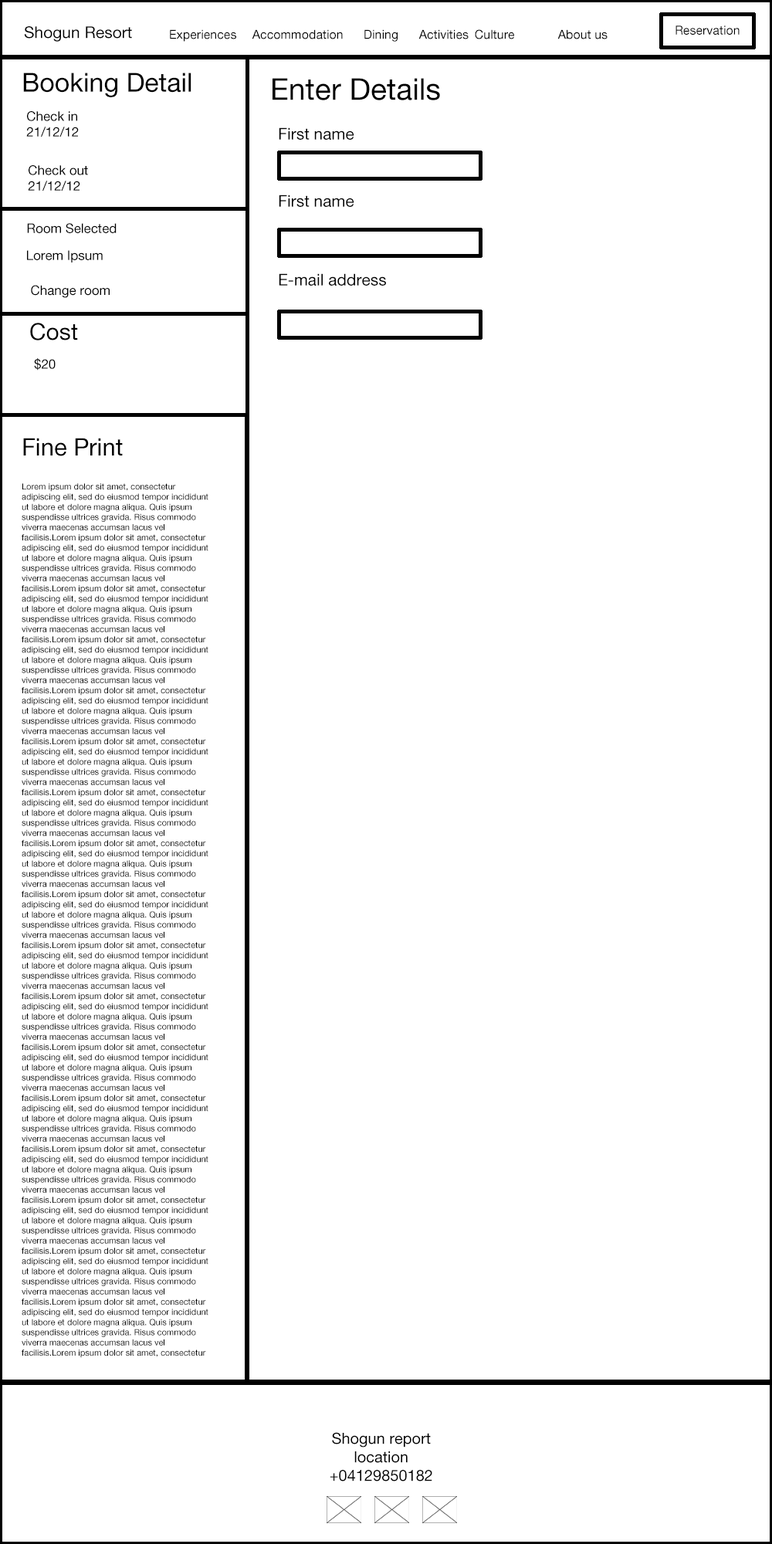
<style>
.page{position:relative;width:772px;height:1544px;background:#ffffff}
.page>*{position:absolute;margin:0}
.t1{font:16.2px "HelveticaNeueLTPro-Roman";color:#000000}
.t2{font:12.4px "HelveticaNeueLTPro-Roman";color:#000000}
.t3{font:26.3px "HelveticaNeueLTPro-Roman";color:#000000}
.t4{font:30.1px "HelveticaNeueLTPro-Roman";color:#000000}
.t5{font:13.1px "HelveticaNeueLTPro-Roman";color:#000000}
.t6{font:23.2px "HelveticaNeueLTPro-Roman";color:#000000}
.t7{font:23.9px "HelveticaNeueLTPro-Roman";color:#000000}
.t8{font:8.5px "HelveticaNeueLTPro-Roman";color:#000000}
.t9{font:15.4px "HelveticaNeueLTPro-Roman";color:#000000}
</style>
<div class="page">
<p class="t1" style="left:24px;top:26px;width:108px;height:16px">Shogun Resort</p>
<p class="t2" style="left:170px;top:29px;width:438px;height:13px">Experiences  Accommodation Dining Activities Culture  About us</p>
<p class="t2" style="left:676px;top:25px;width:64px;height:10px">Reservation</p>
<p class="t3" style="left:23px;top:73px;width:168px;height:24px">Booking Detail</p>
<p class="t4" style="left:273px;top:78px;width:167px;height:22px">Enter Details</p>
<p class="t5" style="left:26px;top:111px;width:53px;height:26px">Check in<br>21/12/12</p>
<p class="t1" style="left:279px;top:127px;width:75px;height:13px">First name</p>
<p class="t5" style="left:28px;top:165px;width:60px;height:26px">Check out<br>21/12/12</p>
<p class="t1" style="left:279px;top:195px;width:75px;height:12px">First name</p>
<p class="t5" style="left:27px;top:223px;width:90px;height:10px">Room Selected</p>
<p class="t5" style="left:27px;top:250px;width:76px;height:13px">Lorem Ipsum</p>
<p class="t1" style="left:279px;top:273px;width:107px;height:13px">E-mail address</p>
<p class="t5" style="left:31px;top:285px;width:79px;height:13px">Change room</p>
<p class="t6" style="left:30px;top:323px;width:48px;height:18px">Cost</p>
<p class="t5" style="left:34px;top:358px;width:22px;height:13px">$20</p>
<p class="t7" style="left:23px;top:438px;width:100px;height:18px">Fine Print</p>
<p class="t8" style="left:22px;top:483px;width:186px;height:875px">Lorem ipsum dolor sit amet, consectetur adipiscing elit, sed do eiusmod tempor incididunt ut labore et dolore magna aliqua. Quis ipsum suspendisse ultrices gravida. Risus commodo viverra maecenas accumsan lacus vel facilisis.Lorem ipsum dolor sit amet, consectetur adipiscing elit, sed do eiusmod tempor incididunt ut labore et dolore magna aliqua. Quis ipsum suspendisse ultrices gravida. Risus commodo viverra maecenas accumsan lacus vel facilisis.Lorem ipsum dolor sit amet, consectetur adipiscing elit, sed do eiusmod tempor incididunt ut labore et dolore magna aliqua. Quis ipsum suspendisse ultrices gravida. Risus commodo viverra maecenas accumsan lacus vel facilisis.Lorem ipsum dolor sit amet, consectetur adipiscing elit, sed do eiusmod tempor incididunt ut labore et dolore magna aliqua. Quis ipsum suspendisse ultrices gravida. Risus commodo viverra maecenas accumsan lacus vel facilisis.Lorem ipsum dolor sit amet, consectetur adipiscing elit, sed do eiusmod tempor incididunt ut labore et dolore magna aliqua. Quis ipsum suspendisse ultrices gravida. Risus commodo viverra maecenas accumsan lacus vel facilisis.Lorem ipsum dolor sit amet, consectetur adipiscing elit, sed do eiusmod tempor incididunt ut labore et dolore magna aliqua. Quis ipsum suspendisse ultrices gravida. Risus commodo viverra maecenas accumsan lacus vel facilisis.Lorem ipsum dolor sit amet, consectetur adipiscing elit, sed do eiusmod tempor incididunt ut labore et dolore magna aliqua. Quis ipsum suspendisse ultrices gravida. Risus commodo viverra maecenas accumsan lacus vel facilisis.Lorem ipsum dolor sit amet, consectetur adipiscing elit, sed do eiusmod tempor incididunt ut labore et dolore magna aliqua. Quis ipsum suspendisse ultrices gravida. Risus commodo viverra maecenas accumsan lacus vel facilisis.Lorem ipsum dolor sit amet, consectetur adipiscing elit, sed do eiusmod tempor incididunt ut labore et dolore magna aliqua. Quis ipsum suspendisse ultrices gravida. Risus commodo viverra maecenas accumsan lacus vel facilisis.Lorem ipsum dolor sit amet, consectetur adipiscing elit, sed do eiusmod tempor incididunt ut labore et dolore magna aliqua. Quis ipsum suspendisse ultrices gravida. Risus commodo viverra maecenas accumsan lacus vel facilisis.Lorem ipsum dolor sit amet, consectetur adipiscing elit, sed do eiusmod tempor incididunt ut labore et dolore magna aliqua. Quis ipsum suspendisse ultrices gravida. Risus commodo viverra maecenas accumsan lacus vel facilisis.Lorem ipsum dolor sit amet, consectetur adipiscing elit, sed do eiusmod tempor incididunt ut labore et dolore magna aliqua. Quis ipsum suspendisse ultrices gravida. Risus commodo viverra maecenas accumsan lacus vel facilisis.Lorem ipsum dolor sit amet, consectetur adipiscing elit, sed do eiusmod tempor incididunt ut labore et dolore magna aliqua. Quis ipsum suspendisse ultrices gravida. Risus commodo viverra maecenas accumsan lacus vel facilisis.Lorem ipsum dolor sit amet, consectetur adipiscing elit, sed do eiusmod tempor incididunt ut labore et dolore magna aliqua. Quis ipsum suspendisse ultrices gravida. Risus commodo viverra maecenas accumsan lacus vel facilisis.Lorem ipsum dolor sit amet, consectetur adipiscing elit, sed do eiusmod tempor incididunt ut labore et dolore magna aliqua. Quis ipsum suspendisse ultrices gravida. Risus commodo viverra maecenas accumsan lacus vel facilisis.Lorem ipsum dolor sit amet, consectetur adipiscing elit, sed do eiusmod tempor incididunt ut labore et dolore magna aliqua. Quis ipsum suspendisse ultrices gravida. Risus commodo viverra maecenas accumsan lacus vel facilisis.Lorem ipsum dolor sit amet, consectetur adipiscing elit, sed do eiusmod tempor incididunt ut labore et dolore magna aliqua. Quis ipsum suspendisse ultrices gravida. Risus commodo viverra maecenas accumsan lacus vel facilisis.Lorem ipsum dolor sit amet, consectetur adipiscing elit, sed do eiusmod tempor incididunt ut labore et dolore magna aliqua. Quis ipsum suspendisse ultrices gravida. Risus commodo viverra maecenas accumsan lacus vel facilisis.</p>
<p class="t9" style="left:330px;top:1432px;width:102px;height:50px;text-align:center">Shogun report<br>location<br>+04129850182</p>
</div>
